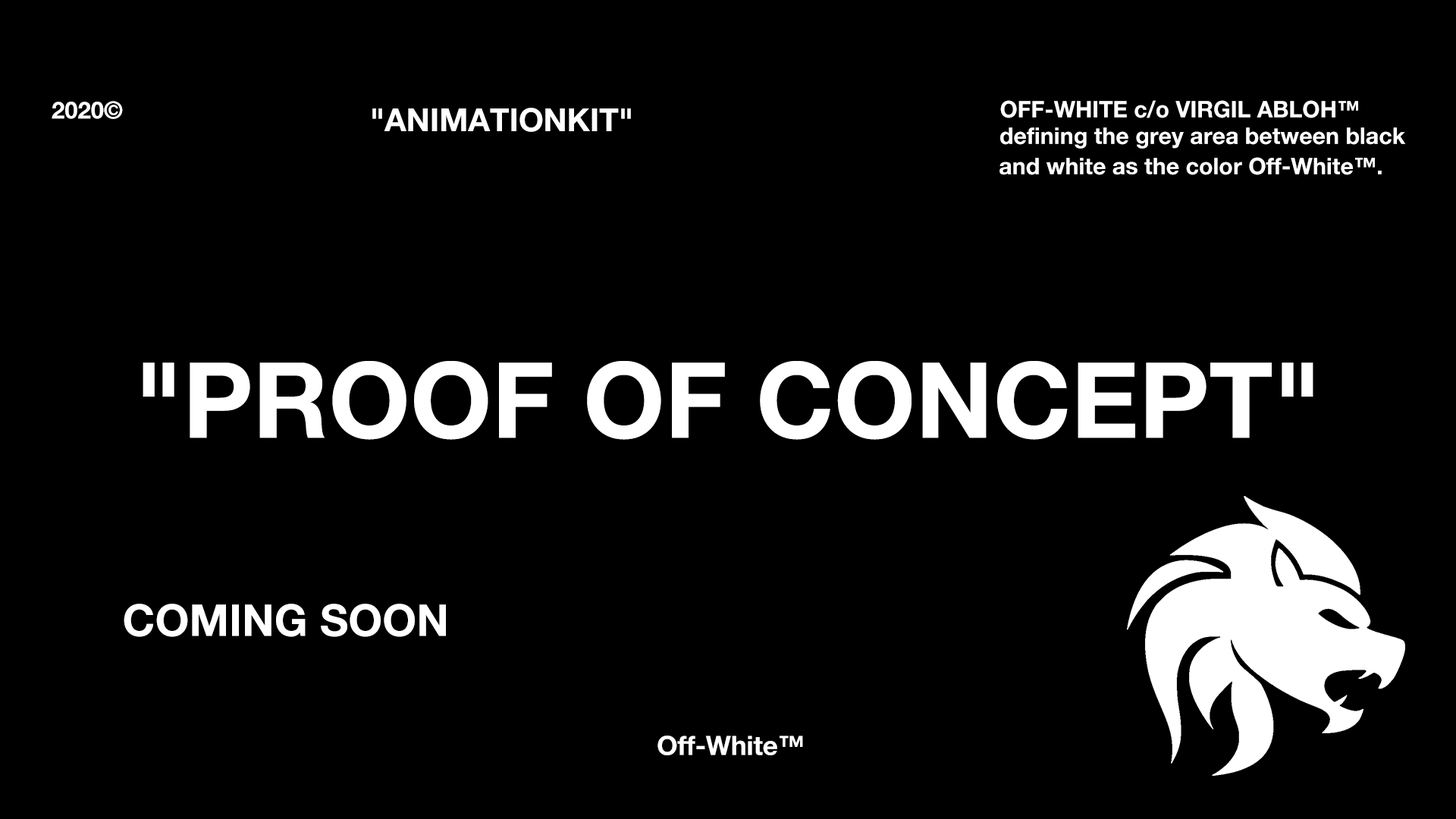
<style>
.page{position:relative;width:1456px;height:819px;background:#000000}
.page>*{position:absolute;margin:0}
.t1{font:23.6px "HelveticaNeue-Bold";color:#ffffff}
.t2{font:22.8px "HelveticaNeue-Bold";color:#ffffff}
.t3{font:31.8px "HelveticaNeue-Bold";color:#ffffff}
.t4{font:23px "HelveticaNeue-Bold";color:#ffffff}
.t5{font:104.9px "HelveticaNeue-Bold";color:#ffffff}
.t6{font:43.9px "HelveticaNeue-Bold";color:#ffffff}
.t7{font:26.4px "HelveticaNeue-Bold";color:#ffffff}
</style>
<div class="page">
<p class="t1" style="left:52px;top:101px;width:71px;height:18px">2020©</p>
<p class="t2" style="left:1000px;top:100px;width:358px;height:18px">OFF-WHITE c/o VIRGIL ABLOH™️</p>
<p class="t3" style="left:372px;top:108px;width:259px;height:24px">"ANIMATIONKIT"</p>
<p class="t4" style="left:1000px;top:127px;width:406px;height:22px">defining the grey area between black</p>
<p class="t4" style="left:999px;top:157px;width:383px;height:18px">and white as the color Off-White™️.</p>
<p class="t5" style="left:143px;top:361px;width:1170px;height:79px">"PROOF OF CONCEPT"</p>
<p class="t6" style="left:124px;top:604px;width:322px;height:33px">COMING SOON</p>
<p class="t7" style="left:657px;top:736px;width:146px;height:19px">Off-White™️</p>
</div>
